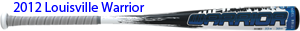
<style>
.page{position:relative;width:300px;height:31px;background:#ffffff}
.page>*{position:absolute;margin:0}
.t1{font:14px "MyriadPro-Regular";color:#0000ff}
</style>
<div class="page">
<p class="t1" style="left:13px;top:2px;width:132px;height:10px">2012 Louisville Warrior</p>
</div>
